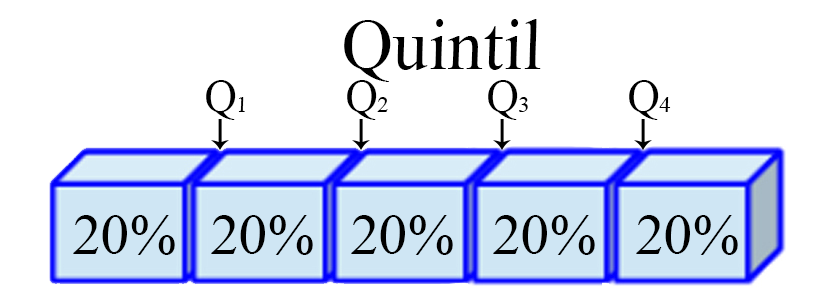
<style>
.page{position:relative;width:820px;height:308px;background:#ffffff}
.page>*{position:absolute;margin:0}
.t1{font:71.6px "TimesNewRomanPSMT";color:#000000;font-style:italic}
.t2{font:45.4px "TimesNewRomanPSMT";color:#000000;font-style:italic}
.t3{font:22.8px "TimesNewRomanPSMT";color:#000000;font-style:italic}
.t4{font:57.5px "TimesNewRomanPSMT";color:#000000;font-style:italic}
</style>
<div class="page">
<p class="t1" style="left:344px;top:19px;width:197px;height:63px">Quintil</p>
<p class="t2" style="left:206px;top:80px;width:39px;height:40px">Q<span class="t3">1</span></p>
<p class="t2" style="left:347px;top:80px;width:41px;height:40px">Q<span class="t3">2</span></p>
<p class="t2" style="left:488px;top:80px;width:40px;height:40px">Q<span class="t3">3</span></p>
<p class="t2" style="left:629px;top:80px;width:42px;height:40px">Q<span class="t3">4</span></p>
<p class="t4" style="left:73px;top:215px;width:102px;height:40px">20%</p>
<p class="t4" style="left:211px;top:215px;width:102px;height:40px">20%</p>
<p class="t4" style="left:351px;top:215px;width:102px;height:40px">20%</p>
<p class="t4" style="left:493px;top:215px;width:102px;height:40px">20%</p>
<p class="t4" style="left:636px;top:215px;width:102px;height:40px">20%</p>
</div>
